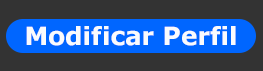
<style>
.page{position:relative;width:263px;height:71px;background:#333333}
.page>*{position:absolute;margin:0}
.t1{font:25px "Verdana-Bold";color:#fafbfd}
</style>
<div class="page">
<p class="t1" style="left:26px;top:26px;width:210px;height:20px">Modificar Perfil</p>
</div>
